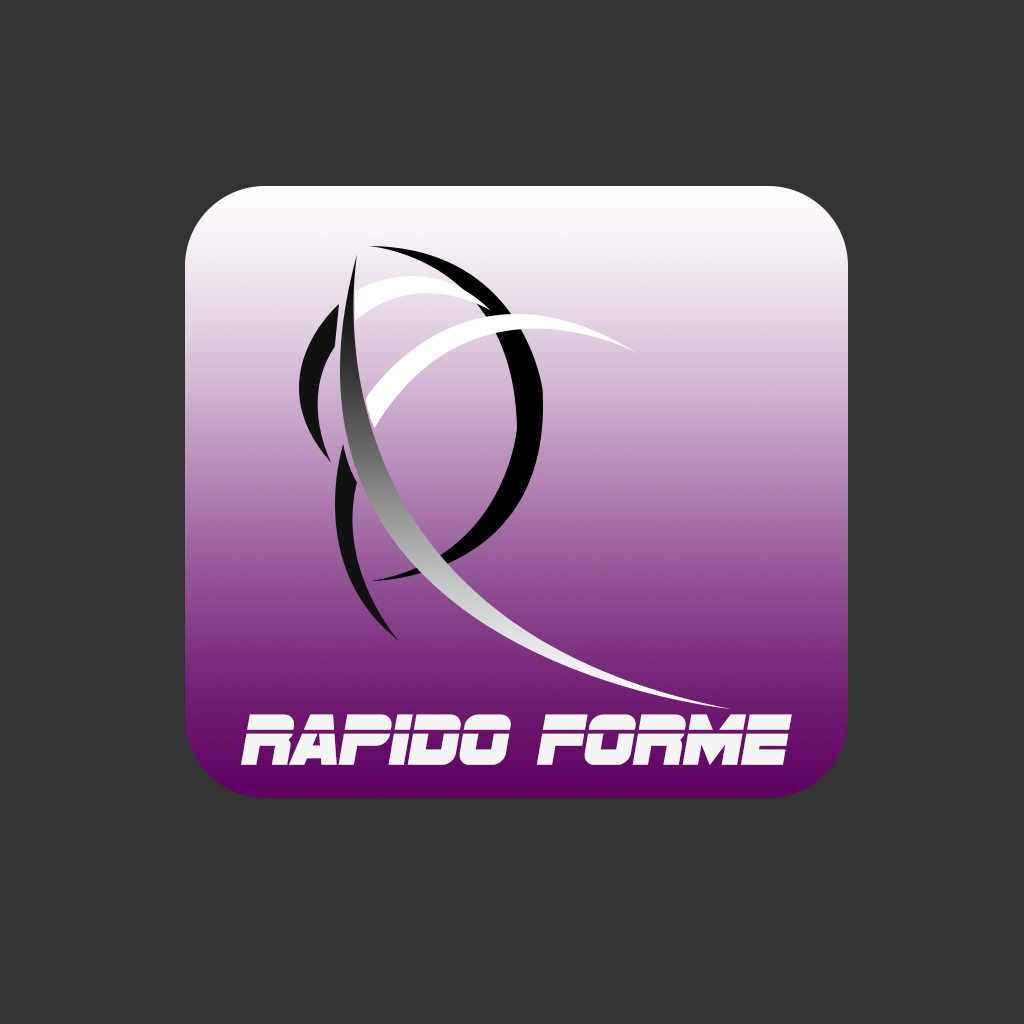
<style>
.page{position:relative;width:1024px;height:1024px;background:#333333}
.page>*{position:absolute;margin:0}
.t1{font:75px "SFSportsNight";color:#f5f5f5}
</style>
<div class="page">
<p class="t1" style="left:241px;top:714px;width:551px;height:51px">RAPIDO FORME</p>
</div>
